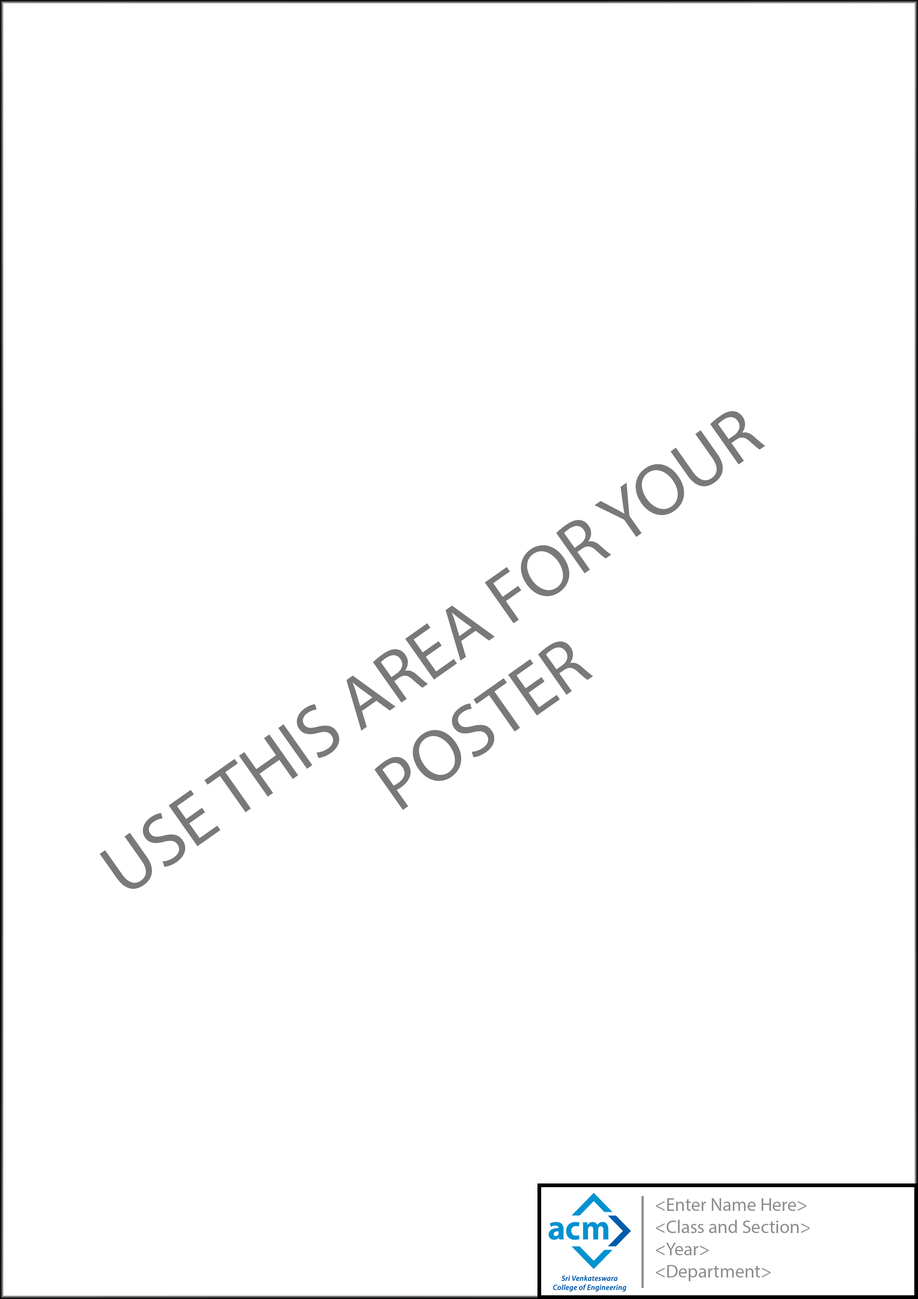
<style>
.page{position:relative;width:918px;height:1299px;background:#ffffff}
.page>*{position:absolute;margin:0}
.t1{font:74px "MyriadPro-Regular";color:#797979}
.t2{font:18.5px "MyriadPro-Regular";color:#8e8d8d}
</style>
<div class="page">
<p class="t1" style="left:100px;top:411px;width:666px;height:478px;rotate:-35deg">USE THIS AREA FOR YOUR POSTER</p>
<p class="t2" style="left:656px;top:1198px;width:154px;height:83px">&lt;Enter Name Here&gt;<br>&lt;Class and Section&gt;<br>&lt;Year&gt;<br>&lt;Department&gt;</p>
</div>
